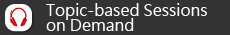
<style>
.page{position:relative;width:230px;height:35px;background:#333333}
.page>*{position:absolute;margin:0}
.t1{font:16px/15px "MicrosoftJhengHeiRegular";color:#ffffff}
</style>
<div class="page">
<p class="t1" style="left:46px;top:3px;width:161px;height:28px">Topic-based Sessions <br>on Demand</p>
</div>
